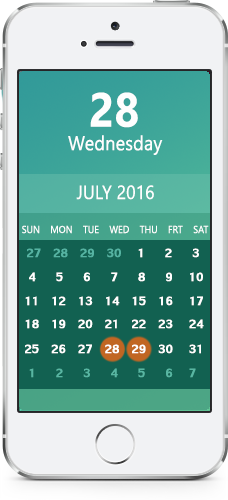
<style>
.page{position:relative;width:228px;height:500px;background:#f1f2f4}
.page>*{position:absolute;margin:0}
.t1{font:48px "LeelawadeeUI-Bold";letter-spacing:0.01em;color:#fefefe;scale:0.9 1}
.t2{font:20.1px "LeelawadeeUI";letter-spacing:0.01em;color:#fefefe;scale:0.9 1}
.t3{font:19.2px "LeelawadeeUI";letter-spacing:0.01em;color:#fefefe;scale:0.9 1}
.t4{font:10.2px "LeelawadeeUI";letter-spacing:0.01em;color:#fefefe;scale:0.9 1}
.t5{font:18px "LilyUPC";letter-spacing:0.01em;color:#55b3a2;scale:0.9 1}
.t6{font:18px "LilyUPC";letter-spacing:0.01em;color:#ffffff;scale:0.9 1}
.t7{font:18px "LilyUPC";letter-spacing:0.01em;color:#58b6a2;scale:0.9 1}
</style>
<div class="page">
<p class="t1" style="left:90px;top:92px;width:48px;height:36px">28</p>
<p class="t2" style="left:68px;top:135px;width:95px;height:20px">Wednesday</p>
<p class="t3" style="left:76px;top:185px;width:78px;height:15px">JULY 2016</p>
<p class="t4" style="left:22px;top:225px;width:187px;height:9px">SUN    MON    TUE    WED    THU    FRT    SAT</p>
<p class="t5" style="left:27px;top:248px;width:172px;height:10px">27   28   29   30 <span class="t6">   1     2     3</span></p>
<p class="t6" style="left:29px;top:272px;width:174px;height:10px">4     5     6     7     8     9    10</p>
<p class="t6" style="left:25px;top:296px;width:178px;height:10px">11   12   13   14   15   16    17</p>
<p class="t6" style="left:25px;top:319px;width:179px;height:10px">18   19   20   21   22   23    24</p>
<p class="t6" style="left:25px;top:344px;width:176px;height:10px">25   26   27   28   29   30    31</p>
<p class="t7" style="left:29px;top:368px;width:167px;height:10px">1     2     3     4     5     6    7</p>
</div>
